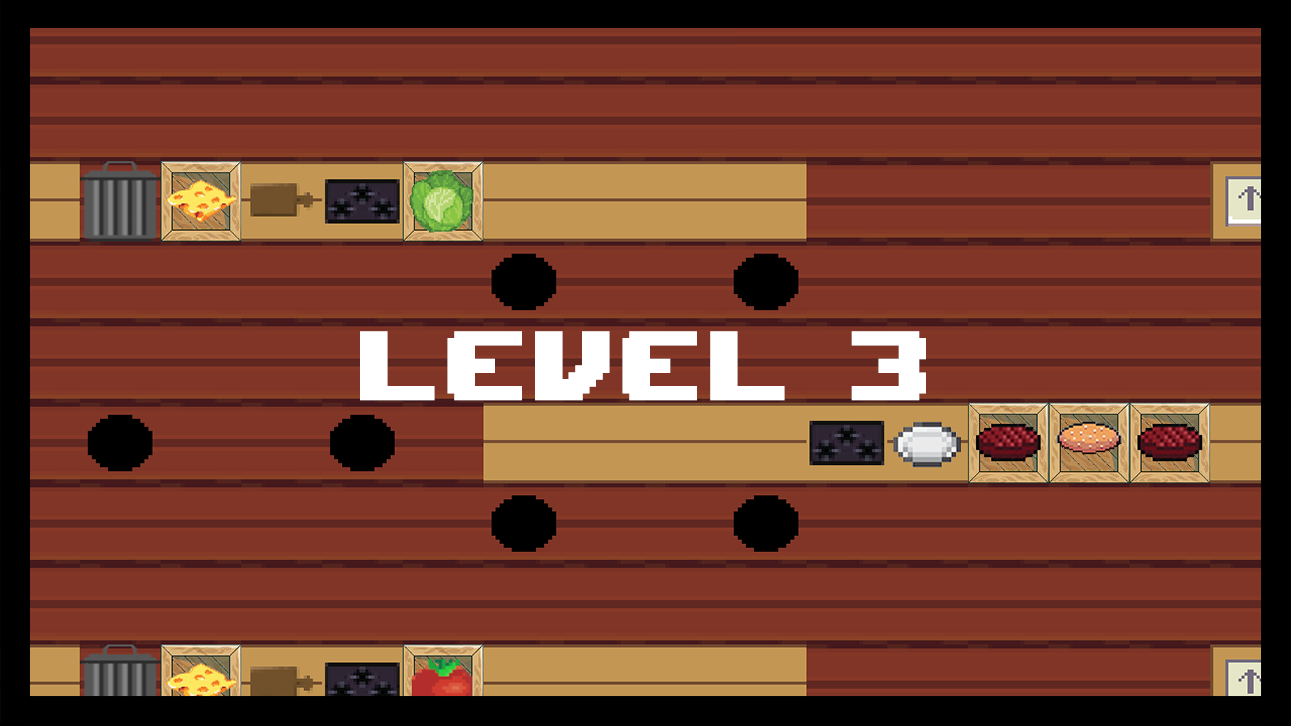
<style>
.page{position:relative;width:1291px;height:726px;background:#803526}
.page>*{position:absolute;margin:0}
.t1{font:136.7px "UpheavalTT-BRK-";letter-spacing:0.025em;color:#ffffff;font-weight:bold}
</style>
<div class="page">
<p class="t1" style="left:360px;top:331px;width:566px;height:70px">LEVEL 3</p>
</div>
